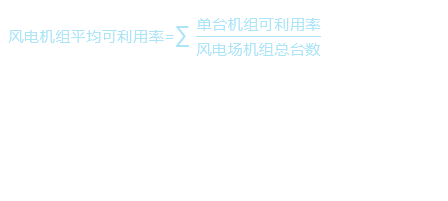
<style>
.page{position:relative;width:448px;height:201px;background:#ffffff}
.page>*{position:absolute;margin:0}
.t1{font:14.7px "MicrosoftYaHei";letter-spacing:0.06em;color:#ace4f8}
.t2{font:21.3px "MicrosoftYaHei";letter-spacing:0.06em;color:#ace4f8}
</style>
<div class="page">
<p class="t1" style="left:9px;top:30px;width:165px;height:13px">风电机组平均可利用率=</p>
<p class="t2" style="left:175px;top:26px;width:14px;height:21px">∑</p>
<p class="t1" style="left:197px;top:18px;width:124px;height:13px">单台机组可利用率</p>
<p class="t1" style="left:197px;top:43px;width:123px;height:13px">风电场机组总台数</p>
</div>
